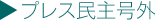
<style>
.page{position:relative;width:160px;height:20px;background:#ffffff}
.page>*{position:absolute;margin:0}
.t1{font:20px "NfMotoyaCedar-W1-90mskp-RKSJ-H";color:#006666}
</style>
<div class="page">
<p class="t1" style="left:22px;top:1px;width:134px;height:19px">プレス民主号外</p>
</div>
